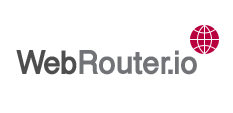
<style>
.page{position:relative;width:233px;height:113px;background:#ffffff}
.page>*{position:absolute;margin:0}
.t1{font:34.7px "MyanmarSangamMN-Bold";letter-spacing:-0.02em;color:#717376}
.t2{font:34.7px "MyanmarSangamMN-Bold";letter-spacing:-0.02em;color:#4e4e4e}
</style>
<div class="page">
<p class="t1" style="left:16px;top:50px;width:181px;height:25px"><span class="t2">Web</span>Router.io</p>
</div>
